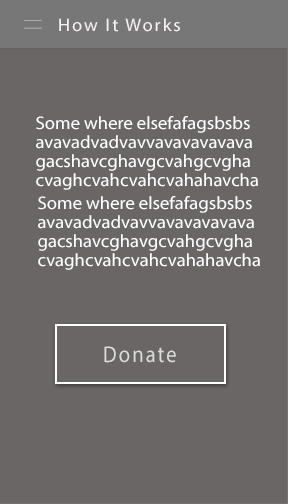
<style>
.page{position:relative;width:288px;height:504px;background:#6b6666}
.page>*{position:absolute;margin:0}
.t1{font:18px "MyriadPro-Regular";letter-spacing:0.1em;color:#f6f1f1;scale:1.04 1}
.t2{font:18px/18.9px "MyriadPro-Regular";color:#ffffff;scale:1.04 1}
.t3{font:23px "MyriadPro-Regular";letter-spacing:0.1em;color:#dddcdc;scale:0.89 1}
</style>
<div class="page">
<p class="t1" style="left:59px;top:18px;width:121px;height:14px">How It Works</p>
<p class="t2" style="left:36px;top:116px;width:222px;height:74px">Some where elsefafagsbsbs<br>avavadvadvavvavavavavava<br>gacshavcghavgcvahgcvgha<br>cvaghcvahcvahcvahahavcha</p>
<p class="t2" style="left:38px;top:196px;width:222px;height:74px">Some where elsefafagsbsbs<br>avavadvadvavvavavavavava<br>gacshavcghavgcvahgcvgha<br>cvaghcvahcvahcvahahavcha</p>
<p class="t3" style="left:104px;top:346px;width:72px;height:17px">Donate</p>
</div>
